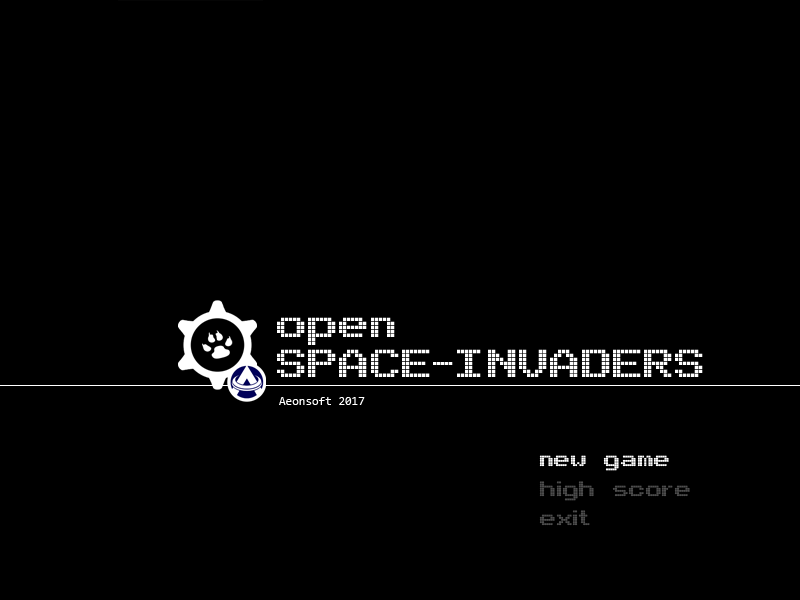
<style>
.page{position:relative;width:800px;height:600px;background:#000000}
.page>*{position:absolute;margin:0}
.t1{font:60px "Arcade";color:#ffffff}
.t2{font:12px "Consolas";color:#ffffff}
.t3{font:32px "Arcade";color:#ffffff}
.t4{font:32px "Arcade";color:#4d4d4d}
</style>
<div class="page">
<p class="t1" style="left:277px;top:317px;width:118px;height:28px">open</p>
<p class="t1" style="left:277px;top:349px;width:426px;height:28px">SPACE-INVADERS</p>
<p class="t2" style="left:279px;top:397px;width:86px;height:8px">Aeonsoft 2017</p>
<p class="t3" style="left:539px;top:455px;width:130px;height:16px">new game</p>
<p class="t4" style="left:539px;top:481px;width:151px;height:20px">high score</p>
<p class="t4" style="left:539px;top:510px;width:51px;height:16px">exit</p>
</div>
